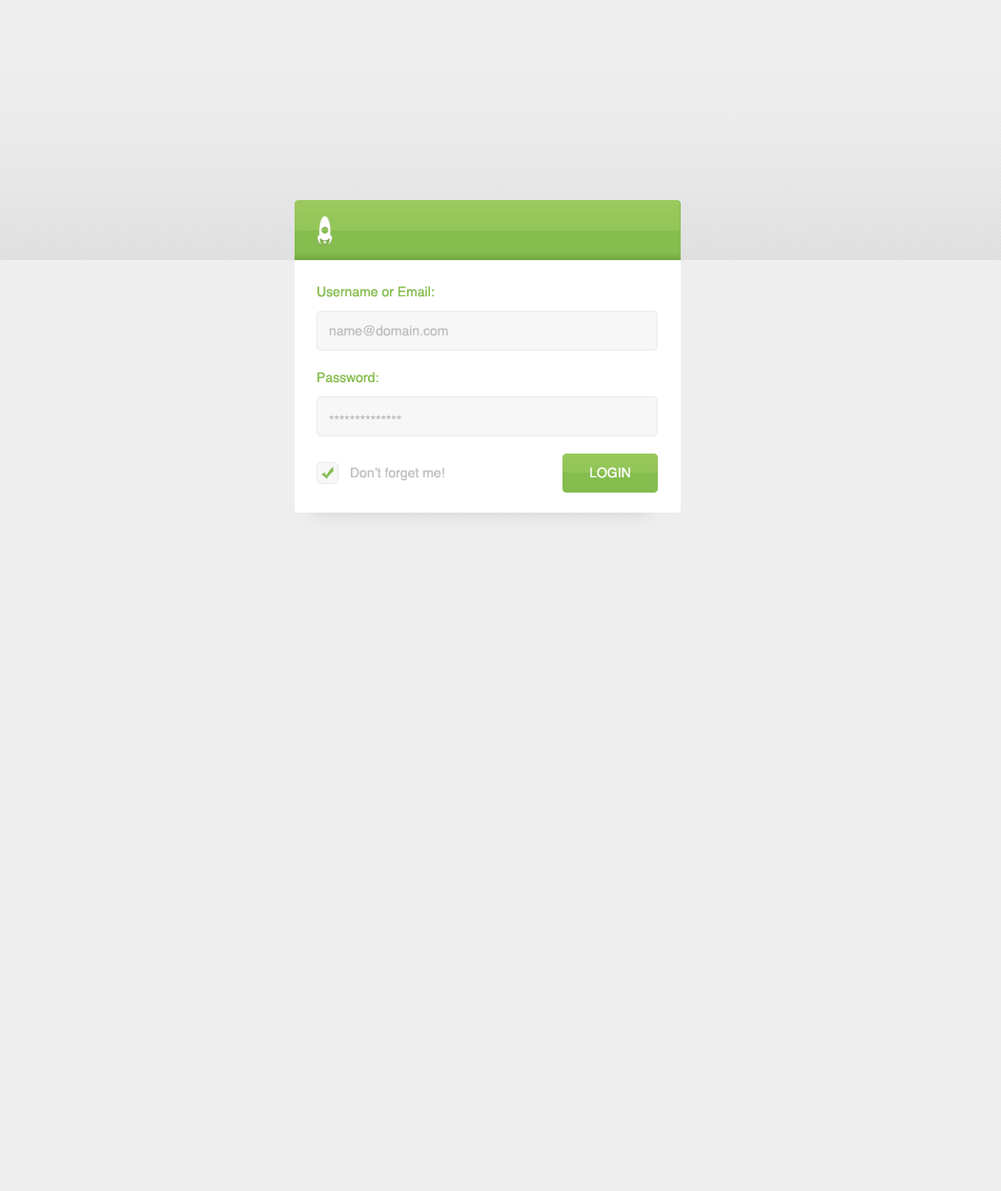
<style>
.page{position:relative;width:1001px;height:1191px;background:#eeeeee}
.page>*{position:absolute;margin:0}
.t1{font:13.3px "Helvetica";color:#85bd4f}
.t2{font:13.3px "Helvetica";color:#bfbfbf}
.t3{font:13.3px "Helvetica";color:#ffffff}
</style>
<div class="page">
<p class="t1" style="left:317px;top:286px;width:117px;height:11px">Username or Email:</p>
<p class="t2" style="left:329px;top:325px;width:119px;height:11px">name@domain.com</p>
<p class="t1" style="left:317px;top:372px;width:61px;height:11px">Password:</p>
<p class="t2" style="left:329px;top:415px;width:72px;height:4px">**************</p>
<p class="t2" style="left:351px;top:467px;width:93px;height:14px">Don’t forget me!</p>
<p class="t3" style="left:590px;top:467px;width:40px;height:11px">LOGIN</p>
</div>
